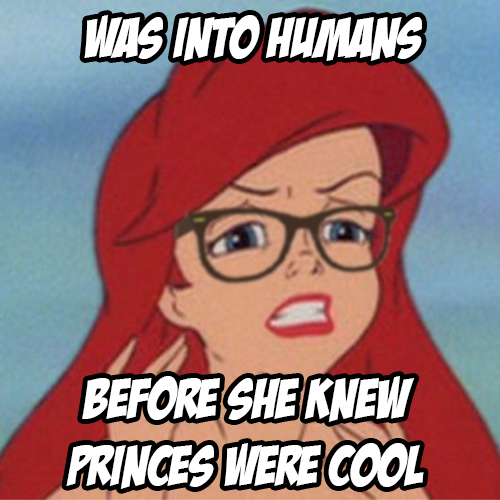
<style>
.page{position:relative;width:500px;height:500px}
.page>*{position:absolute;margin:0}
.t1{font:55.7px "BadaBoomBB";color:#ffffff}
</style>
<div class="page">
<p class="t1" style="left:84px;top:15px;width:338px;height:46px">WAS INTO HUMANS</p>
<p class="t1" style="left:66px;top:376px;width:358px;height:113px;text-align:center">BEFORE SHE KNEW<br>PRINCES WERE COOL</p>
</div>
